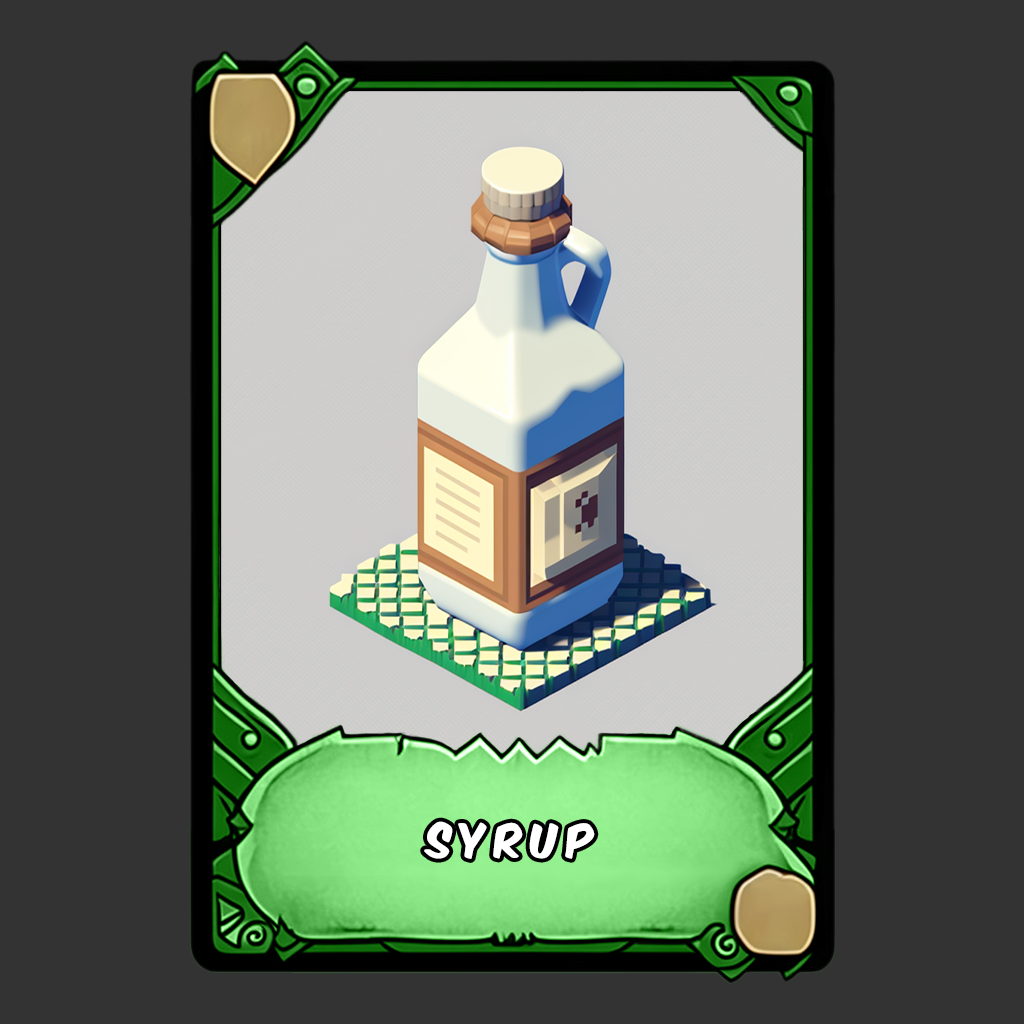
<style>
.page{position:relative;width:1024px;height:1024px;background:#333333}
.page>*{position:absolute;margin:0}
.t1{font:40px "KomikaAxis";letter-spacing:0.2em;color:#ffffff}
</style>
<div class="page">
<p class="t1" style="left:424px;top:821px;width:171px;height:38px">syrup</p>
</div>
